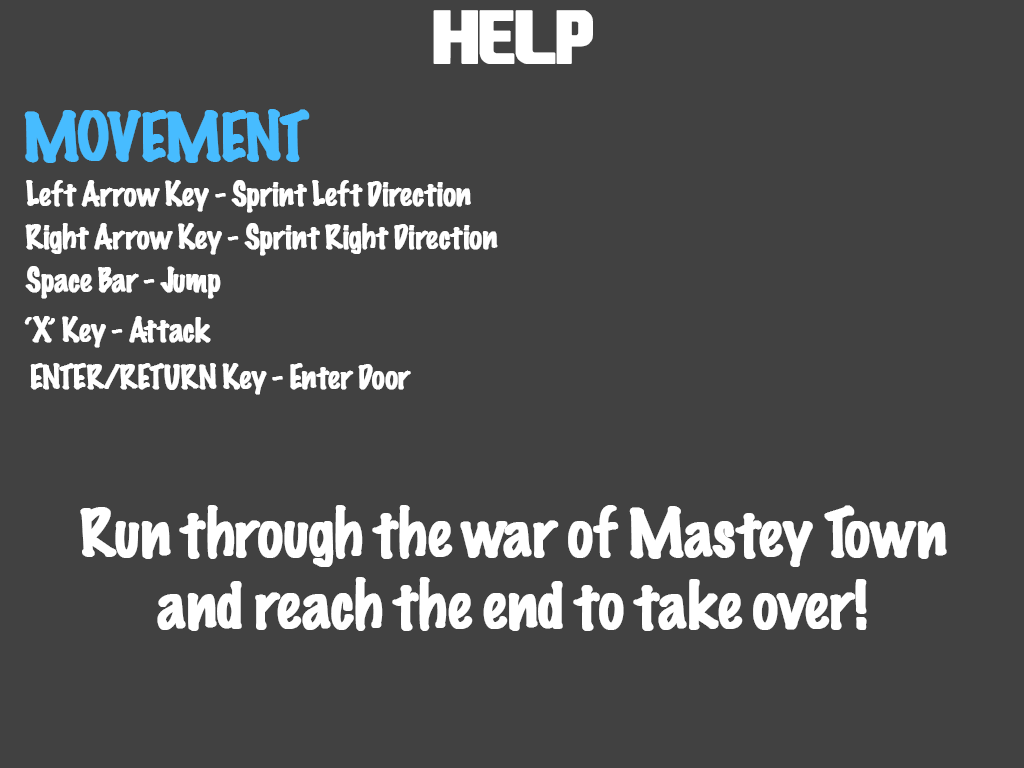
<style>
.page{position:relative;width:1024px;height:768px;background:#414141}
.page>*{position:absolute;margin:0}
.t1{font:72px "EASPORTS";letter-spacing:-0.05em;color:#ffffff;font-weight:bold}
.t2{font:60px "MarkerFelt-Thin";letter-spacing:-0.05em;color:#47bcff;font-weight:bold}
.t3{font:30px "MarkerFelt-Thin";letter-spacing:-0.05em;color:#ffffff;font-weight:bold}
.t4{font:60px "MarkerFelt-Thin";letter-spacing:-0.05em;color:#ffffff;font-weight:bold}
</style>
<div class="page">
<p class="t1" style="left:433px;top:10px;width:160px;height:54px">HELP</p>
<p class="t2" style="left:24px;top:109px;width:286px;height:54px">MOVEMENT</p>
<p class="t3" style="left:26px;top:180px;width:445px;height:33px">Left Arrow Key - Sprint Left Direction</p>
<p class="t3" style="left:25px;top:223px;width:473px;height:33px">Right Arrow Key - Sprint Right Direction</p>
<p class="t3" style="left:25px;top:266px;width:196px;height:33px">Space Bar - Jump</p>
<p class="t3" style="left:24px;top:316px;width:187px;height:32px">‘X’ Key - Attack</p>
<p class="t3" style="left:30px;top:363px;width:381px;height:32px">ENTER/RETURN Key - Enter Door</p>
<p class="t4" style="left:80px;top:505px;width:867px;height:126px;text-align:center">Run through the war of Mastey Town<br>and reach the end to take over!</p>
</div>
